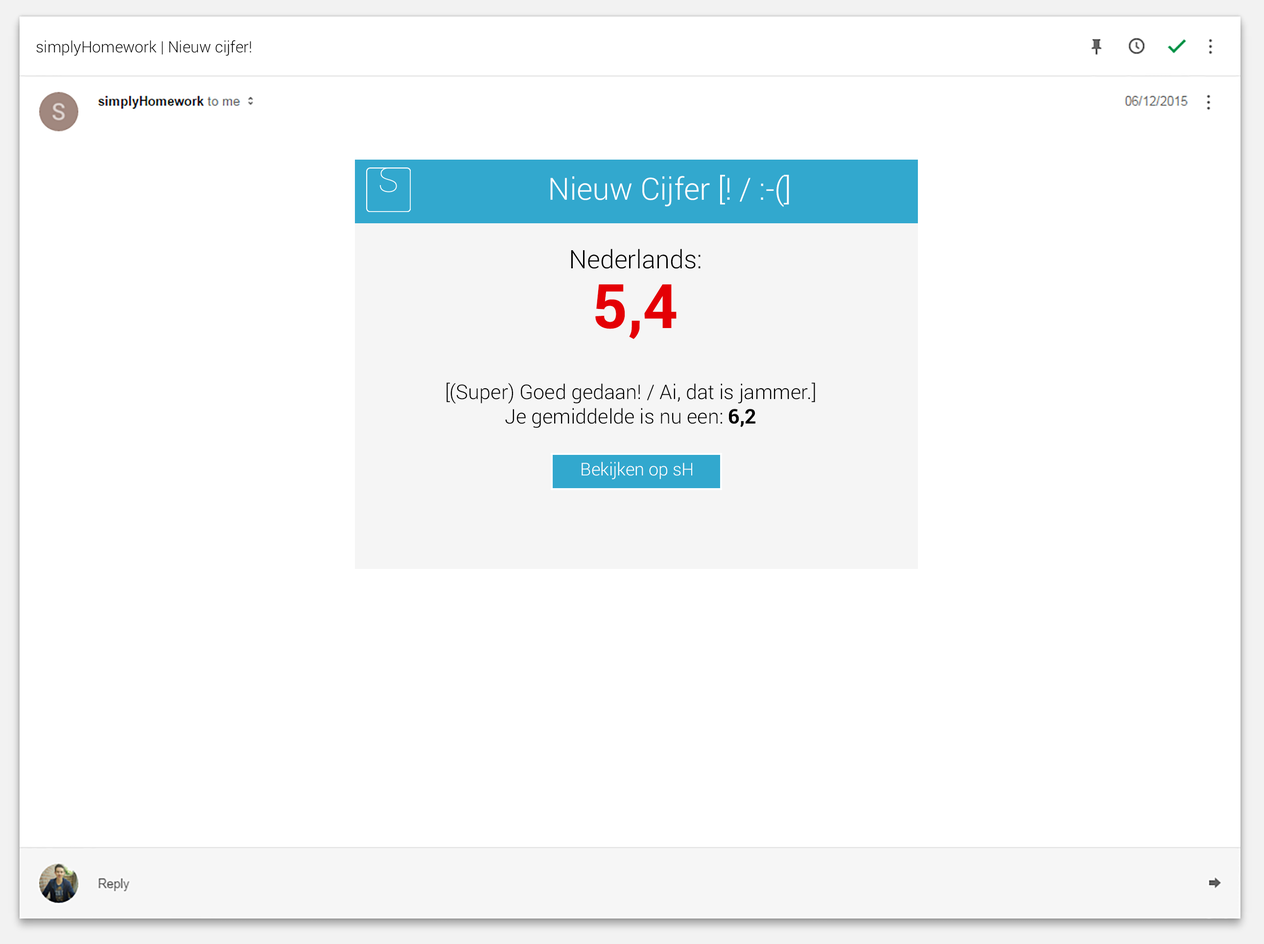
<style>
.page{position:relative;width:1264px;height:944px;background:#ffffff}
.page>*{position:absolute;margin:0}
.t1{font:15.7px "Roboto-Light";color:#000000}
.t2{font:30.7px "Roboto-Light";color:#ffffff}
.t3{font:25.5px "Roboto-Light";color:#000000}
.t4{font:61.3px "Roboto-Bold";color:#e40005}
.t5{font:20.2px "Roboto-Light";color:#000000}
.t6{font:20.2px "Roboto-Bold";color:#000000}
.t7{font:17.6px "Roboto-Light";color:#ffffff}
</style>
<div class="page">
<p class="t1" style="left:36px;top:40px;width:215px;height:16px">simplyHomework | Nieuw cijfer!</p>
<p class="t2" style="left:550px;top:175px;width:239px;height:32px">Nieuw Cijfer [! / :-(]</p>
<p class="t3" style="left:571px;top:249px;width:129px;height:20px">Nederlands:</p>
<p class="t4" style="left:595px;top:284px;width:81px;height:55px">5,4</p>
<p class="t5" style="left:446px;top:382px;width:369px;height:46px;text-align:center">[(Super) Goed gedaan! / Ai, dat is jammer.]<br>Je gemiddelde is nu een: <span class="t6">6,2</span></p>
<p class="t7" style="left:581px;top:462px;width:111px;height:17px">Bekijken op sH</p>
</div>
